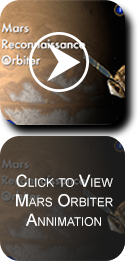
<style>
.page{position:relative;width:139px;height:271px}
.page>*{position:absolute;margin:0}
.t1{font:16.7px/19.4px "ArialMT";color:#ffffff;font-variant:small-caps}
</style>
<div class="page">
<p class="t1" style="left:16px;top:174px;width:97px;height:52px;text-align:center">Click to View Mars Orbiter Annimation</p>
</div>
